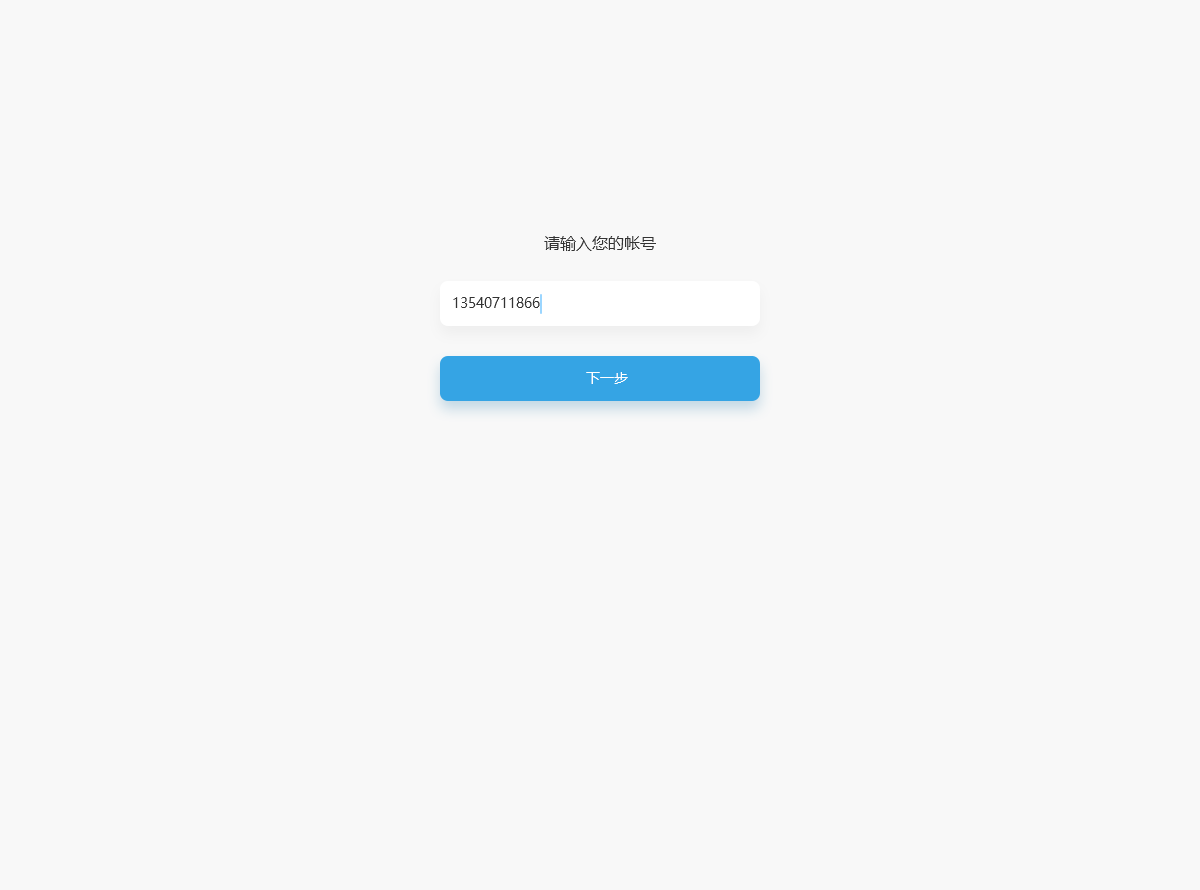
<style>
.page{position:relative;width:1200px;height:890px;background:#f8f8f8}
.page>*{position:absolute;margin:0}
.t1{font:16px "MicrosoftYaHei";color:#333333}
.t2{font:14px "MicrosoftYaHei";color:#333333}
.t3{font:14px "MicrosoftYaHei";color:#feffff}
</style>
<div class="page">
<p class="t1" style="left:544px;top:236px;width:112px;height:15px">请输入您的帐号</p>
<p class="t2" style="left:453px;top:297px;width:87px;height:11px">13540711866</p>
<p class="t3" style="left:586px;top:372px;width:42px;height:12px">下一步</p>
</div>
